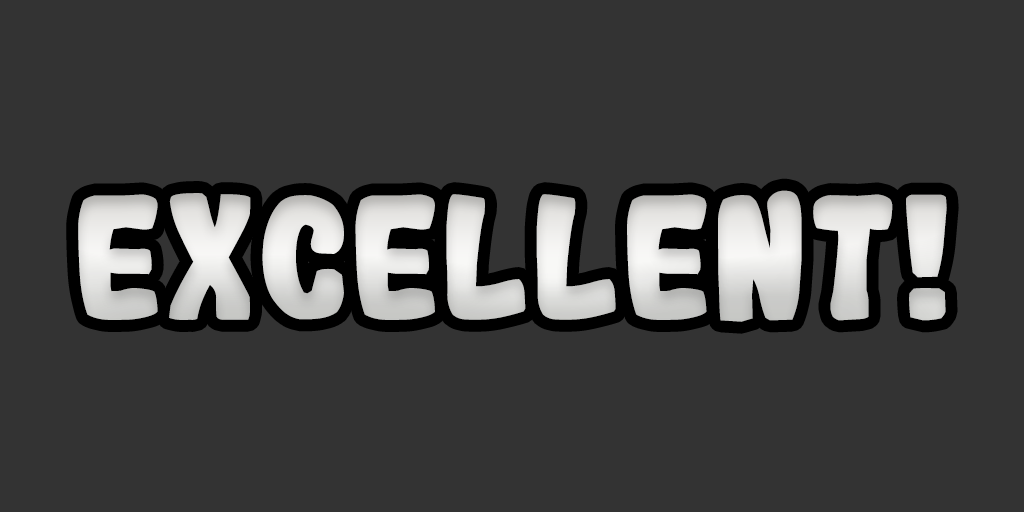
<style>
.page{position:relative;width:1024px;height:512px;background:#333333}
.page>*{position:absolute;margin:0}
.t1{font:166.7px "Gogono-Cocoa-Mochi"}
</style>
<div class="page">
<p class="t1" style="left:78px;top:190px;width:869px;height:132px">EXCELLENT!</p>
</div>
